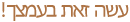
<style>
.page{position:relative;width:130px;height:22px;background:#ffffff}
.page>*{position:absolute;margin:0}
.t1{font:21.6px "MyriadHebrew-Regular";letter-spacing:-0.09em;color:#ad7344}
</style>
<div class="page">
<p class="t1" style="left:2px;top:2px;width:127px;height:19px">! ךצמעב  תאז  השע</p>
</div>
